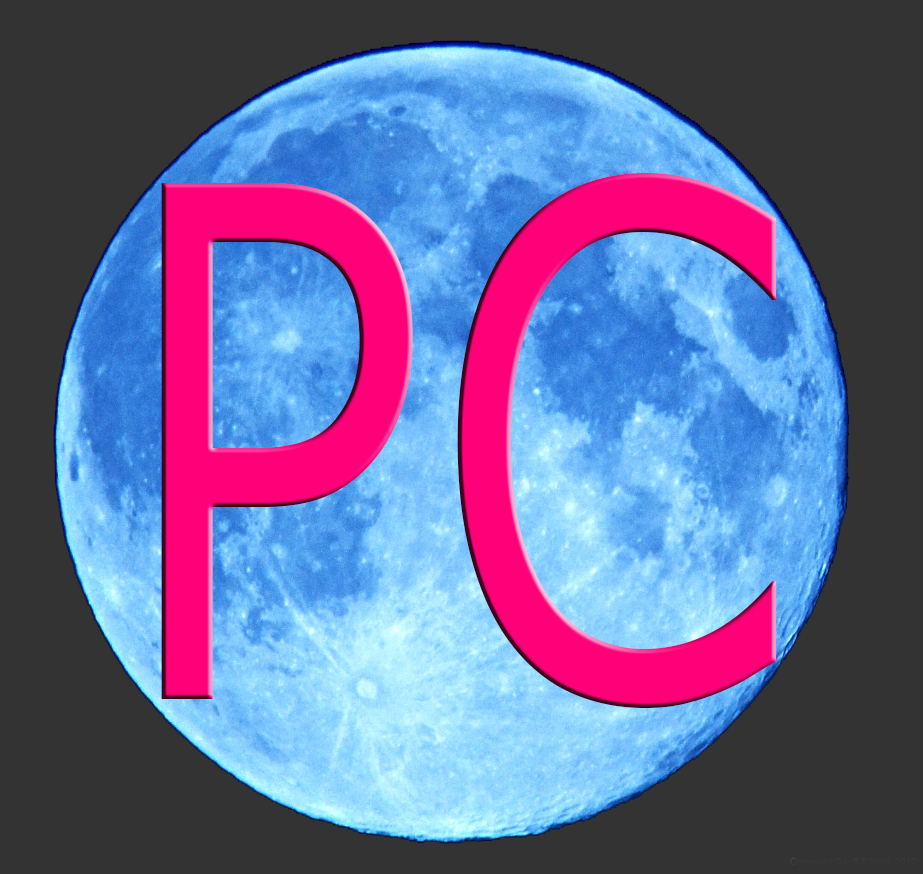
<style>
.page{position:relative;width:923px;height:874px;background:#333333}
.page>*{position:absolute;margin:0}
.t1{font:709.9px "Verdana";color:#ff0078;scale:0.74 1}
</style>
<div class="page">
<p class="t1" style="left:161px;top:173px;width:616px;height:535px">PC</p>
</div>
